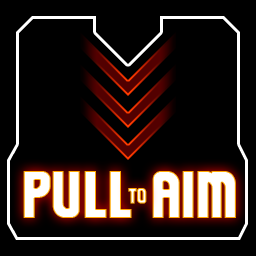
<style>
.page{position:relative;width:256px;height:256px;background:#000000}
.page>*{position:absolute;margin:0}
.t1{font:59.4px "Komikazoom";color:#ffffff;text-transform:uppercase;font-weight:bold}
.t2{font:20px "Komikazoom";text-transform:uppercase;font-weight:bold}
</style>
<div class="page">
<p class="t1" style="left:23px;top:171px;width:213px;height:47px">PULL    Aim</p>
<p class="t2" style="left:128px;top:188px;width:19px;height:16px">to</p>
</div>
